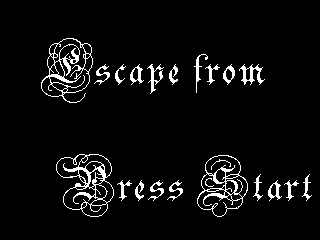
<style>
.page{position:relative;width:320px;height:240px;background:#000000}
.page>*{position:absolute;margin:0}
.t1{font:72px "Parchment-Regular";letter-spacing:0.05em;color:#ffffff}
</style>
<div class="page">
<p class="t1" style="left:41px;top:38px;width:224px;height:65px">Escape from</p>
<p class="t1" style="left:56px;top:154px;width:256px;height:63px">Press Start</p>
</div>
